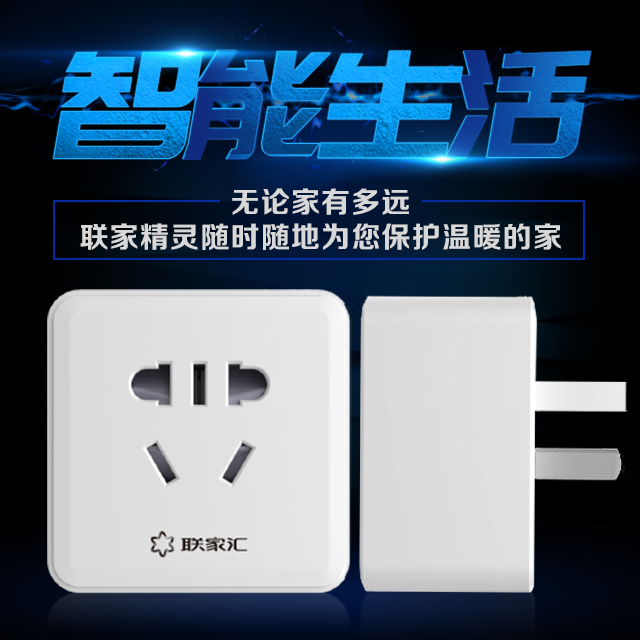
<style>
.page{position:relative;width:640px;height:640px}
.page>*{position:absolute;margin:0}
.t1{font:151.3px "PangMenZhengDao"}
.t2{font:151.3px "PangMenZhengDao";font-weight:bold}
.t3{font:29.1px/34.8px "FZZCHJW--GB1-0";letter-spacing:0.04em;color:#d8d8d8}
</style>
<div class="page">
<p class="t1" style="left:53px;top:52px;width:150px;height:107px">智</p>
<p class="t1" style="left:182px;top:50px;width:150px;height:109px">能</p>
<p class="t2" style="left:317px;top:50px;width:146px;height:109px">生</p>
<p class="t1" style="left:444px;top:51px;width:147px;height:107px">活</p>
<p class="t3" style="left:80px;top:188px;width:481px;height:62px;text-align:center">无论家有多远<br>联家精灵随时随地为您保护温暖的家</p>
</div>
